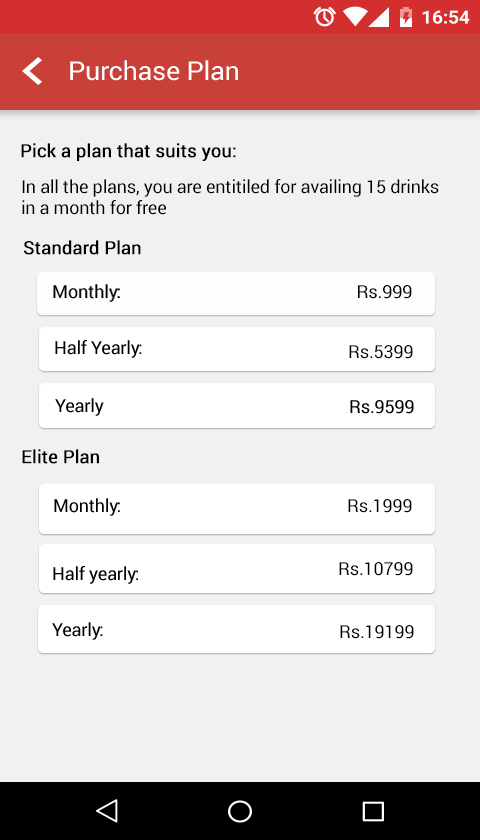
<style>
.page{position:relative;width:480px;height:840px;background:#f1f1f1}
.page>*{position:absolute;margin:0}
.t1{font:26.1px "Roboto-Regular";letter-spacing:-0.01em;color:#ffffff;scale:1.03 1}
.t2{font:18px "Roboto-Regular";letter-spacing:-0.01em;color:#000000;font-weight:bold}
.t3{font:18px "Roboto-Regular";letter-spacing:-0.01em;color:#000000}
</style>
<div class="page">
<p class="t1" style="left:70px;top:60px;width:168px;height:21px">Purchase Plan</p>
<p class="t2" style="left:21px;top:143px;width:215px;height:18px">Pick a plan that suits you:</p>
<p class="t3" style="left:22px;top:179px;width:417px;height:36px">In all the plans, you are entitiled for availing 15 drinks in a month for free</p>
<p class="t2" style="left:24px;top:240px;width:117px;height:15px">Standard Plan</p>
<p class="t3" style="left:53px;top:284px;width:67px;height:18px">Monthly:</p>
<p class="t3" style="left:358px;top:285px;width:54px;height:14px">Rs.999</p>
<p class="t3" style="left:55px;top:340px;width:87px;height:18px">Half Yearly:</p>
<p class="t3" style="left:349px;top:345px;width:64px;height:14px">Rs.5399</p>
<p class="t3" style="left:55px;top:398px;width:49px;height:18px">Yearly</p>
<p class="t3" style="left:350px;top:400px;width:64px;height:14px">Rs.9599</p>
<p class="t2" style="left:22px;top:449px;width:77px;height:15px">Elite Plan</p>
<p class="t3" style="left:54px;top:498px;width:66px;height:18px">Monthly:</p>
<p class="t3" style="left:348px;top:499px;width:64px;height:14px">Rs.1999</p>
<p class="t3" style="left:53px;top:566px;width:85px;height:18px">Half yearly:</p>
<p class="t3" style="left:339px;top:562px;width:74px;height:14px">Rs.10799</p>
<p class="t3" style="left:52px;top:622px;width:51px;height:18px">Yearly:</p>
<p class="t3" style="left:340px;top:625px;width:74px;height:14px">Rs.19199</p>
</div>
